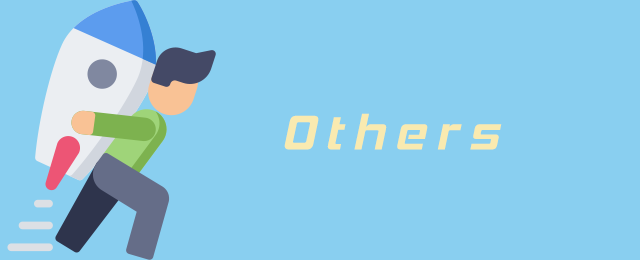
<style>
.page{position:relative;width:640px;height:260px;background:#89cff0}
.page>*{position:absolute;margin:0}
.t1{font:50px "HemiHeadRg-BoldItalic";letter-spacing:0.2em;color:#f9eab0}
</style>
<div class="page">
<p class="t1" style="left:284px;top:113px;width:218px;height:37px">Others</p>
</div>
